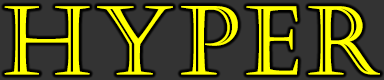
<style>
.page{position:relative;width:384px;height:80px;background:#333333}
.page>*{position:absolute;margin:0}
.t1{font:94px "Castellar";letter-spacing:0.05em;color:#ffff00;font-weight:bold}
</style>
<div class="page">
<p class="t1" style="left:4px;top:6px;width:376px;height:69px">HYPER</p>
</div>
